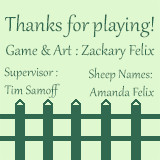
<style>
.page{position:relative;width:160px;height:160px;background:#e0f8cf}
.page>*{position:absolute;margin:0}
.t1{font:25px "Gabriola";color:#306850}
.t2{font:18px "Gabriola";color:#306850}
.t3{font:15px "Gabriola";color:#306850}
</style>
<div class="page">
<p class="t1" style="left:5px;top:14px;width:149px;height:24px">Thanks for playing!</p>
<p class="t2" style="left:6px;top:43px;width:149px;height:17px">Game &amp; Art : Zackary Felix</p>
<p class="t3" style="left:4px;top:67px;width:56px;height:31px;text-align:center">Supervisor :<br>Tim Samoff</p>
<p class="t3" style="left:89px;top:67px;width:65px;height:30px;text-align:center">Sheep Names: <br>Amanda Felix</p>
</div>
